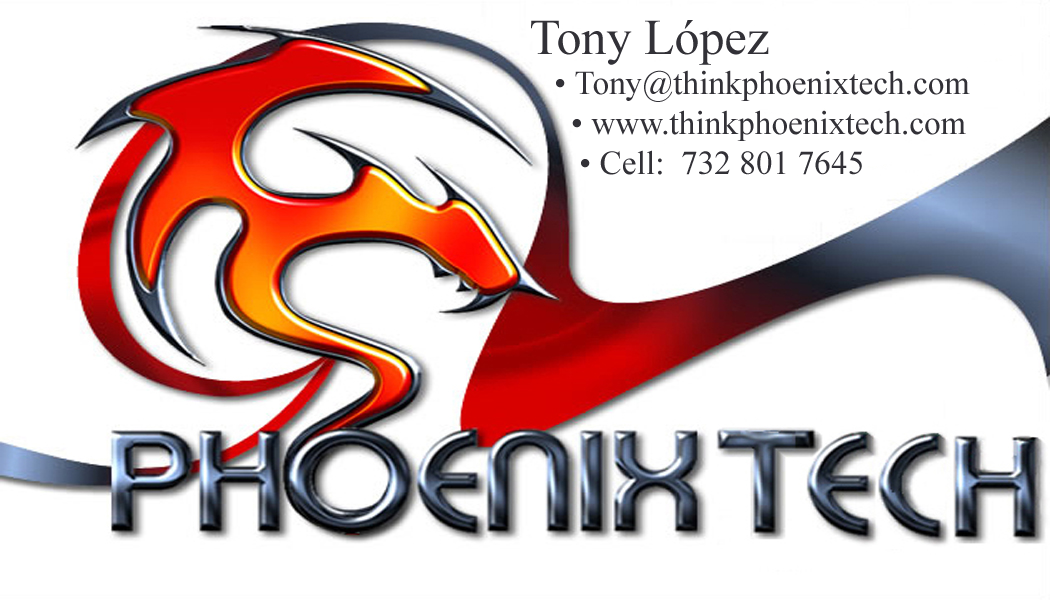
<style>
.page{position:relative;width:1050px;height:600px;background:#ffffff}
.page>*{position:absolute;margin:0}
.t1{font:33.3px "TimesNewRomanPSMT";color:#323137}
.t2{font:50px "TimesNewRomanPSMT";color:#323137}
</style>
<div class="page">
<p class="t1" style="left:531px;top:20px;width:439px;height:155px"><span class="t2">Tony López<br></span>   • Tony@thinkphoenixtech.com<br>     • www.thinkphoenixtech.com<br>      • Cell:  732 801 7645</p>
</div>
